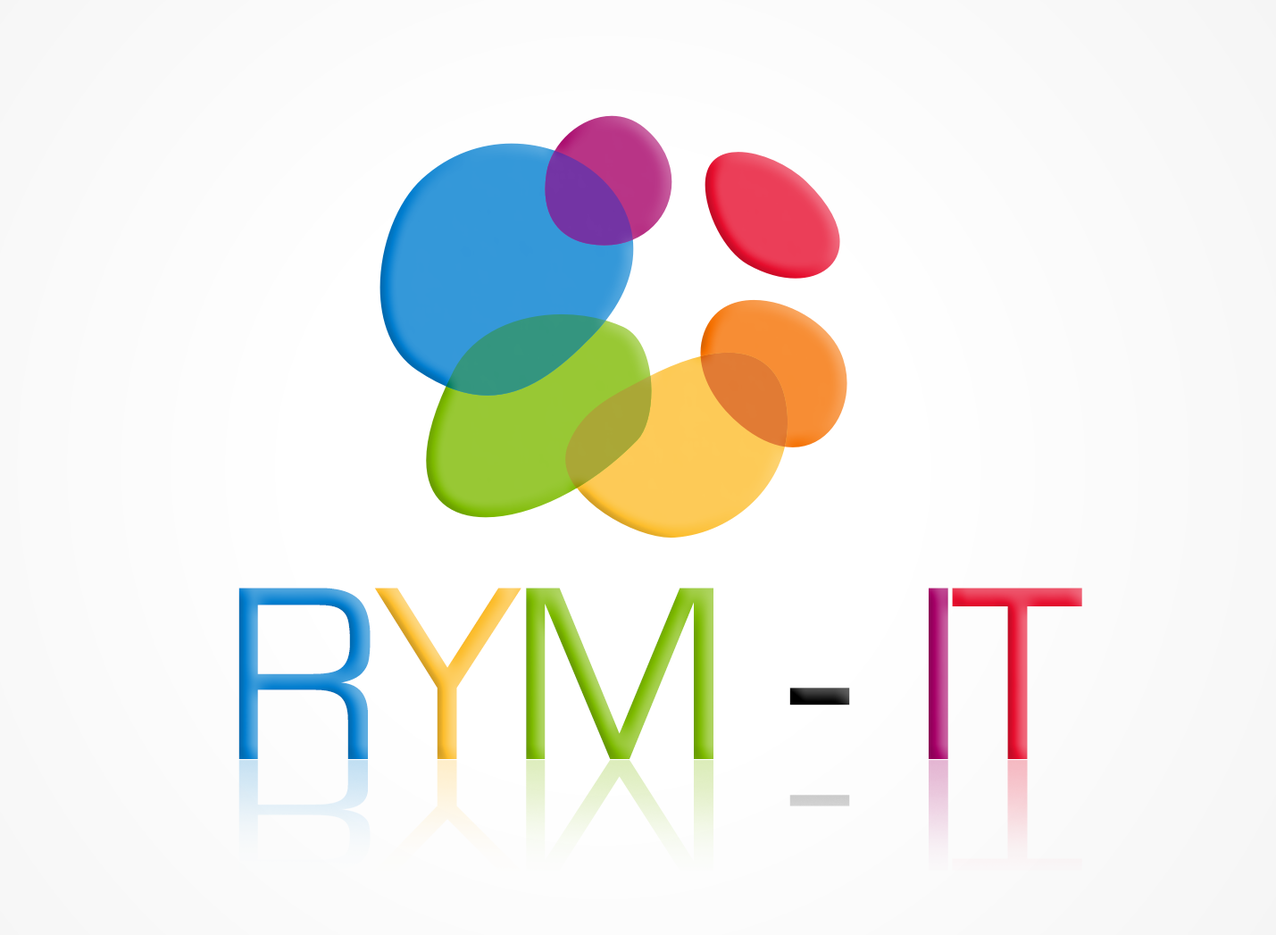
<style>
.page{position:relative;width:1276px;height:935px}
.page>*{position:absolute;margin:0}
.t1{font:279px "EuroStyleNormal";letter-spacing:-0.01em}
</style>
<div class="page">
<p class="t1" style="left:238px;top:587px;width:844px;height:172px">RYM - IT</p>
</div>
